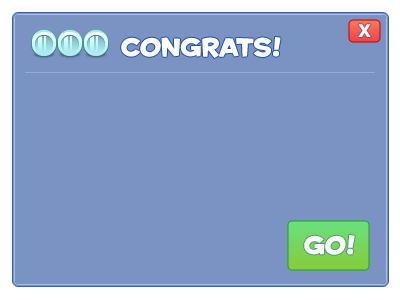
<style>
.page{position:relative;width:400px;height:300px;background:#7a93c3}
.page>*{position:absolute;margin:0}
.t1{font:24px "Helvetica-Bold";color:#ffffff}
.t2{font:24px "Housearama-Kingpin";color:#ffffff}
</style>
<div class="page">
<p class="t1" style="left:358px;top:24px;width:13px;height:13px">x</p>
<p class="t2" style="left:121px;top:37px;width:160px;height:21px">Congrats!</p>
<p class="t2" style="left:304px;top:235px;width:51px;height:20px">GO!</p>
</div>
